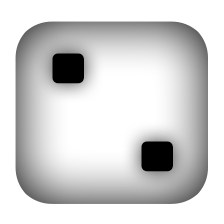
<style>
.page{position:relative;width:224px;height:224px;background:#ffffff}
.page>*{position:absolute;margin:0}
.t1{font:213px "Isolation";color:#000000}
</style>
<div class="page">
<p class="t1" style="left:52px;top:53px;width:32px;height:31px">.</p>
<p class="t1" style="left:141px;top:141px;width:32px;height:31px">.</p>
</div>
